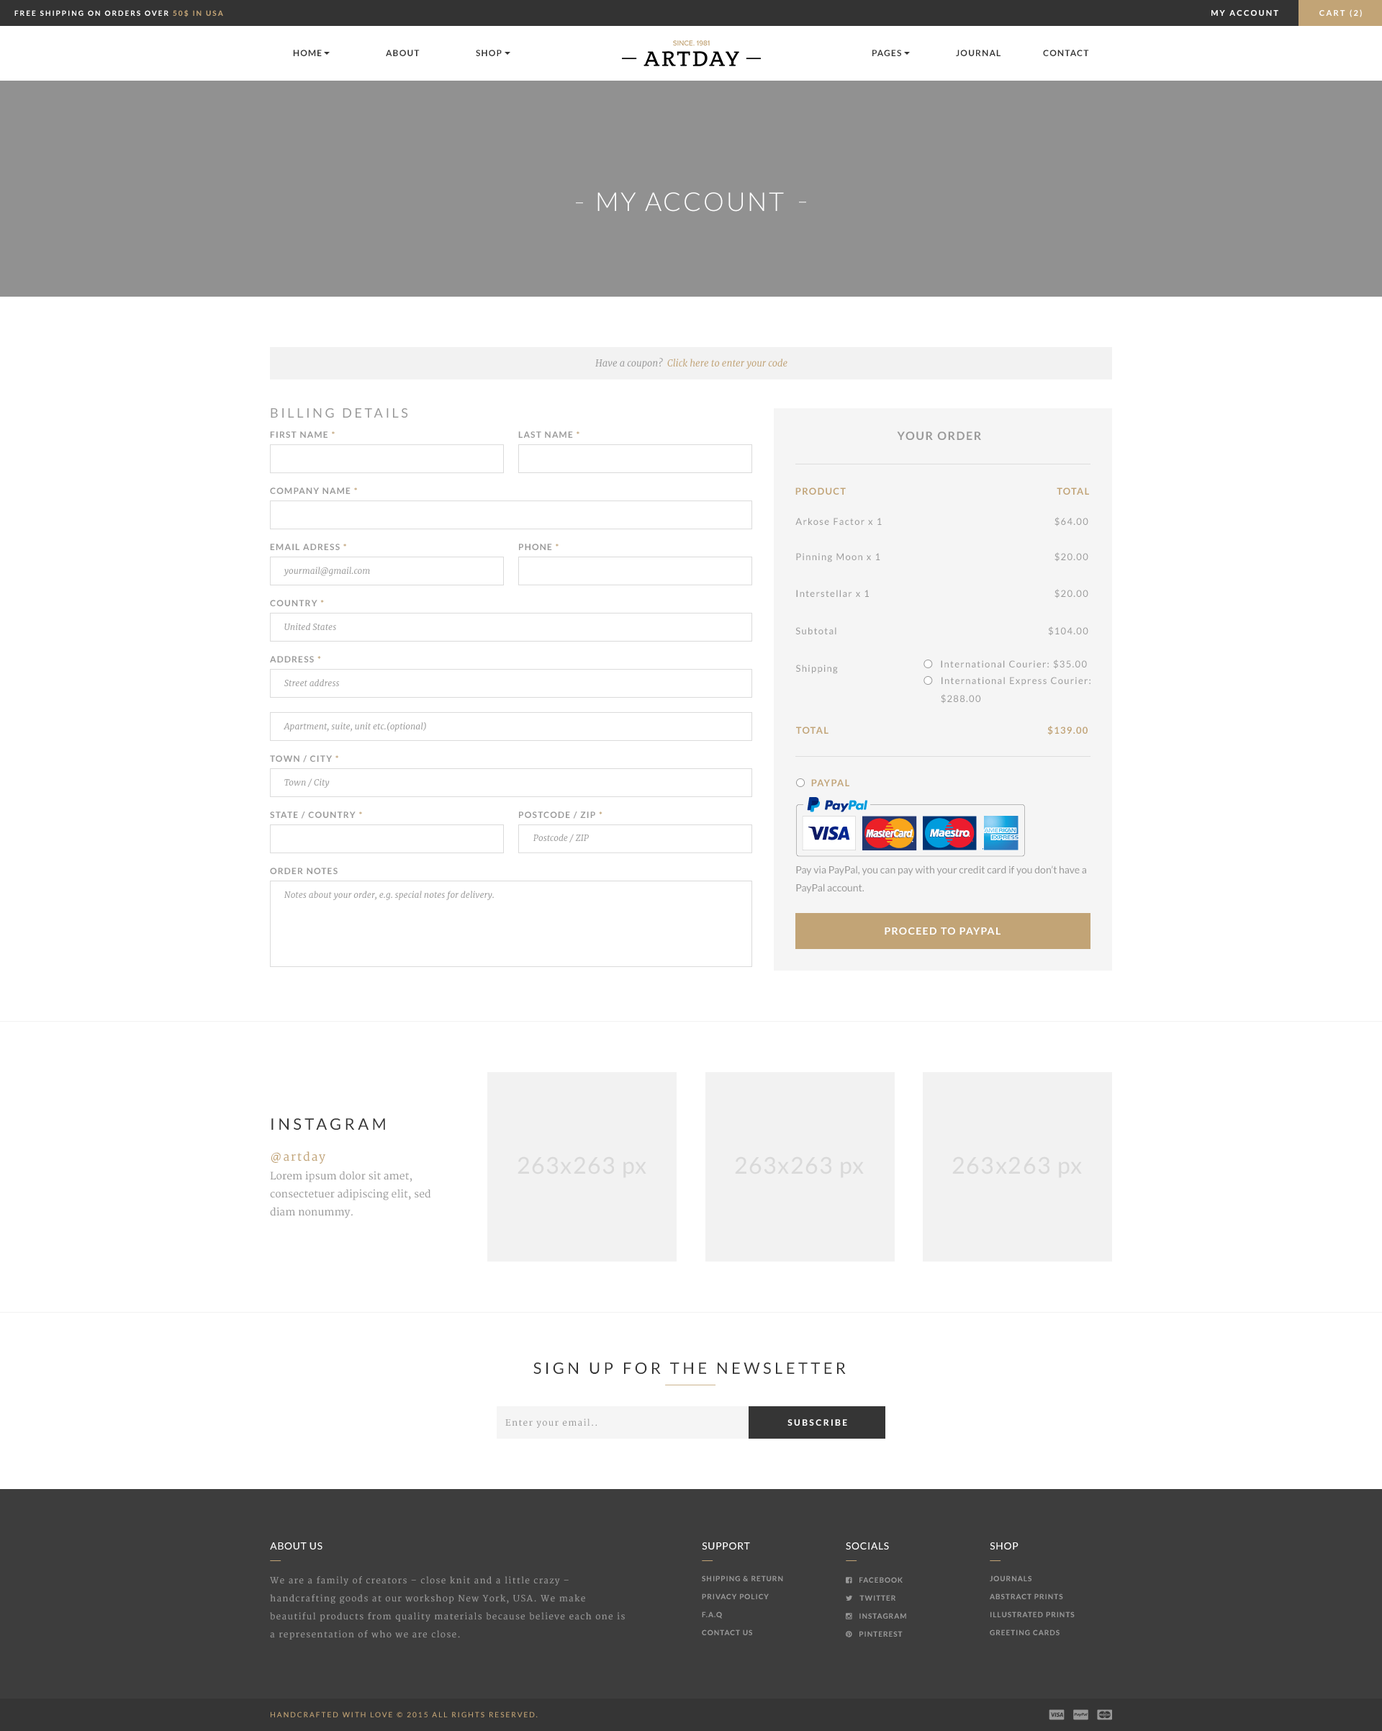
<style>
.page{position:relative;width:1382px;height:1731px;background:#ffffff}
.page>*{position:absolute;margin:0}
.t1{font:7.2px "Lato-Bold";letter-spacing:0.2em;color:#ffffff;text-transform:uppercase}
.t2{font:7.2px "Lato-Bold";letter-spacing:0.2em;color:#c2a476;text-transform:uppercase}
.t3{font:7.9px "Lato-Bold";letter-spacing:0.2em;color:#ffffff;text-transform:uppercase}
.t4{font:8.6px "Lato-Bold";letter-spacing:0.1em;color:#353535;text-transform:uppercase}
.t5{font:25.9px "Lato-Light";letter-spacing:0.075em;color:#ffffff;text-transform:uppercase}
.t6{font:9.4px "Merriweather-Italic";color:#c2a476}
.t7{font:9.4px "Merriweather-Italic";color:#999999}
.t8{font:13px "Lato-Regular";letter-spacing:0.2em;color:#999999;text-transform:uppercase}
.t9{font:8.6px "Lato-Bold";letter-spacing:0.1em;color:#999999;text-transform:uppercase}
.t10{font:8.6px "Lato-Bold";letter-spacing:0.1em;color:#c2a476;text-transform:uppercase}
.t11{font:11.5px "Lato-Bold";letter-spacing:0.1em;color:#999999;text-transform:uppercase}
.t12{font:9.7px "Lato-Bold";letter-spacing:0.1em;color:#c2a476;text-transform:uppercase;scale:0.96 1}
.t13{font:9.4px "Lato-Regular";letter-spacing:0.1em;color:#999999}
.t14{font:8.6px "Merriweather-Italic";color:#999999}
.t15{font:9.4px/18px "Lato-Regular";letter-spacing:0.1em;color:#999999}
.t16{font:9.7px "Lato-Bold";letter-spacing:0.1em;color:#c2a476;scale:0.96 1}
.t17{font:9.7px "Lato-Bold";letter-spacing:0.1em;color:#c2a476;text-transform:uppercase;scale:0.97 1}
.t18{font:10.1px/18px "Lato-Regular";color:#999999}
.t19{font:10.1px "Lato-Bold";letter-spacing:0.1em;color:#ffffff;text-transform:uppercase}
.t20{font:15.8px "Lato-Regular";letter-spacing:0.2em;color:#353535;text-transform:uppercase}
.t21{font:11.5px "Merriweather";letter-spacing:0.1em;color:#c2a476}
.t22{font:23px "Lato-Regular";letter-spacing:0.05em;color:#d9d9d9}
.t23{font:10.1px/18px "Merriweather";color:#999999}
.t24{font:8.6px "Merriweather";letter-spacing:0.1em;color:#999999}
.t25{font:8.6px "Lato-Bold";letter-spacing:0.2em;color:#ffffff;text-transform:uppercase}
.t26{font:10.1px "Lato-Regular";letter-spacing:0.05em;color:#ffffff;text-transform:uppercase}
.t27{font:8.6px/18px "Merriweather";letter-spacing:0.1em;color:#999999}
.t28{font:7.2px/18px "Lato-Bold";letter-spacing:0.1em;color:#999999;text-transform:uppercase}
.t29{font:7.2px "Lato-Regular";letter-spacing:0.2em;color:#c2a476;text-transform:uppercase}
</style>
<div class="page">
<p class="t1" style="left:14px;top:9px;width:209px;height:8px">FREE SHIPPING ON ORDERS OVER <span class="t2">50$ IN USA</span></p>
<p class="t3" style="left:1212px;top:10px;width:67px;height:6px">My account</p>
<p class="t3" style="left:1320px;top:9px;width:42px;height:8px">Cart (2)</p>
<p class="t4" style="left:293px;top:50px;width:29px;height:6px">Home</p>
<p class="t4" style="left:386px;top:50px;width:34px;height:6px">About</p>
<p class="t4" style="left:476px;top:50px;width:26px;height:6px">Shop</p>
<p class="t4" style="left:873px;top:50px;width:28px;height:6px">PAges</p>
<p class="t4" style="left:956px;top:50px;width:45px;height:6px">Journal</p>
<p class="t4" style="left:1043px;top:50px;width:46px;height:6px">Contact</p>
<p class="t5" style="left:598px;top:192px;width:186px;height:20px">MY ACCOUNT</p>
<p class="t6" style="left:595px;top:358px;width:193px;height:11px"><span class="t7">Have a coupon?  </span>Click here to enter your code</p>
<p class="t8" style="left:271px;top:408px;width:137px;height:10px">Billing Details</p>
<p class="t9" style="left:270px;top:431px;width:65px;height:7px">First Name <span class="t10">*</span></p>
<p class="t9" style="left:518px;top:431px;width:62px;height:7px">Last Name <span class="t10">*</span></p>
<p class="t11" style="left:897px;top:431px;width:84px;height:9px">Your order</p>
<p class="t9" style="left:270px;top:487px;width:87px;height:7px">Company Name <span class="t10">*</span></p>
<p class="t12" style="left:796px;top:487px;width:50px;height:8px">product</p>
<p class="t12" style="left:1057px;top:487px;width:32px;height:8px">Total</p>
<p class="t13" style="left:796px;top:518px;width:86px;height:7px">Arkose Factor x 1</p>
<p class="t13" style="left:1055px;top:517px;width:34px;height:9px">$64.00</p>
<p class="t9" style="left:270px;top:544px;width:76px;height:6px">Email Adress <span class="t10">*</span></p>
<p class="t9" style="left:519px;top:544px;width:40px;height:6px">Phone <span class="t10">*</span></p>
<p class="t13" style="left:796px;top:553px;width:85px;height:9px">Pinning Moon x 1</p>
<p class="t13" style="left:1055px;top:552px;width:34px;height:10px">$20.00</p>
<p class="t14" style="left:284px;top:567px;width:86px;height:9px">yourmail@gmail.com</p>
<p class="t13" style="left:796px;top:590px;width:73px;height:7px">Interstellar x 1</p>
<p class="t13" style="left:1055px;top:589px;width:34px;height:9px">$20.00</p>
<p class="t9" style="left:270px;top:600px;width:54px;height:6px">Country <span class="t10">*</span></p>
<p class="t14" style="left:284px;top:623px;width:52px;height:7px">United States</p>
<p class="t13" style="left:796px;top:627px;width:41px;height:7px">Subtotal</p>
<p class="t13" style="left:1048px;top:626px;width:41px;height:10px">$104.00</p>
<p class="t9" style="left:270px;top:656px;width:51px;height:6px">Address <span class="t10">*</span></p>
<p class="t13" style="left:796px;top:665px;width:42px;height:9px">Shipping</p>
<p class="t13" style="left:941px;top:660px;width:146px;height:9px">International Courier: $35.00</p>
<p class="t15" style="left:941px;top:677px;width:150px;height:26px">International Express Courier:<br>$288.00</p>
<p class="t14" style="left:284px;top:679px;width:56px;height:7px">Street address</p>
<p class="t14" style="left:284px;top:721px;width:142px;height:11px">Apartment, suite, unit etc.(optional)</p>
<p class="t16" style="left:1048px;top:726px;width:40px;height:9px">$139.00</p>
<p class="t12" style="left:796px;top:726px;width:33px;height:8px">Total</p>
<p class="t9" style="left:270px;top:755px;width:68px;height:7px">Town / city <span class="t10">*</span></p>
<p class="t14" style="left:284px;top:778px;width:46px;height:10px">Town / City</p>
<p class="t17" style="left:811px;top:779px;width:39px;height:7px">Paypal</p>
<p class="t9" style="left:270px;top:811px;width:92px;height:8px">State / Country <span class="t10">*</span></p>
<p class="t9" style="left:519px;top:811px;width:84px;height:8px">Postcode / ZIP <span class="t10">*</span></p>
<p class="t14" style="left:534px;top:834px;width:55px;height:8px">Postcode / ZIP</p>
<p class="t9" style="left:270px;top:868px;width:68px;height:6px">Order Notes</p>
<p class="t18" style="left:796px;top:865px;width:290px;height:29px">Pay via PayPal, you can pay with your credit card if you don’t have a PayPal account.</p>
<p class="t14" style="left:284px;top:891px;width:210px;height:9px">Notes about your order, e.g. special notes for delivery.</p>
<p class="t19" style="left:885px;top:927px;width:116px;height:8px">Proceed to PayPal</p>
<p class="t20" style="left:271px;top:1118px;width:114px;height:12px">Instagram</p>
<p class="t21" style="left:271px;top:1151px;width:54px;height:13px">@artday</p>
<p class="t22" style="left:518px;top:1156px;width:129px;height:22px">263x263 px</p>
<p class="t22" style="left:735px;top:1156px;width:129px;height:22px">263x263 px</p>
<p class="t22" style="left:953px;top:1156px;width:129px;height:22px">263x263 px</p>
<p class="t23" style="left:270px;top:1171px;width:161px;height:47px">Lorem ipsum dolor sit amet, consectetuer adipiscing elit, sed <br>diam nonummy.</p>
<p class="t20" style="left:534px;top:1362px;width:312px;height:12px">Sign up for the newsletter</p>
<p class="t24" style="left:505px;top:1418px;width:93px;height:10px">Enter your email..</p>
<p class="t25" style="left:788px;top:1419px;width:59px;height:7px">Subscribe</p>
<p class="t26" style="left:270px;top:1542px;width:53px;height:7px">About Us</p>
<p class="t26" style="left:702px;top:1542px;width:48px;height:7px">Support</p>
<p class="t26" style="left:846px;top:1542px;width:43px;height:7px">socials</p>
<p class="t26" style="left:990px;top:1542px;width:29px;height:7px">Shop</p>
<p class="t27" style="left:270px;top:1576px;width:355px;height:63px">We are a family of creators – close knit and a little crazy – handcrafting goods at our workshop New York, USA. We make beautiful products from quality materials because believe each one is a representation of who we are close.</p>
<p class="t28" style="left:702px;top:1575px;width:81px;height:60px">SHIPPING &amp; RETURN<br>PRIVACY POLICY<br>F.A.Q<br>CONTACT US</p>
<p class="t28" style="left:990px;top:1575px;width:85px;height:60px">JOURNALS<br>ABSTRACT PRINTS<br>ILLUSTRATED PRINTS<br>GREETING CARDS</p>
<p class="t29" style="left:271px;top:1711px;width:267px;height:6px">HANDCRAFTED WITH LOVE © 2015 ALL RIGHTS RESERVED.</p>
</div>
